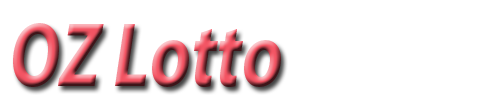
<style>
.page{position:relative;width:500px;height:100px;background:#ffffff}
.page>*{position:absolute;margin:0}
.t1{font:92px "MyriadPro-BoldIt";scale:0.79 1}
</style>
<div class="page">
<p class="t1" style="left:13px;top:23px;width:268px;height:64px">OZ Lotto</p>
</div>
